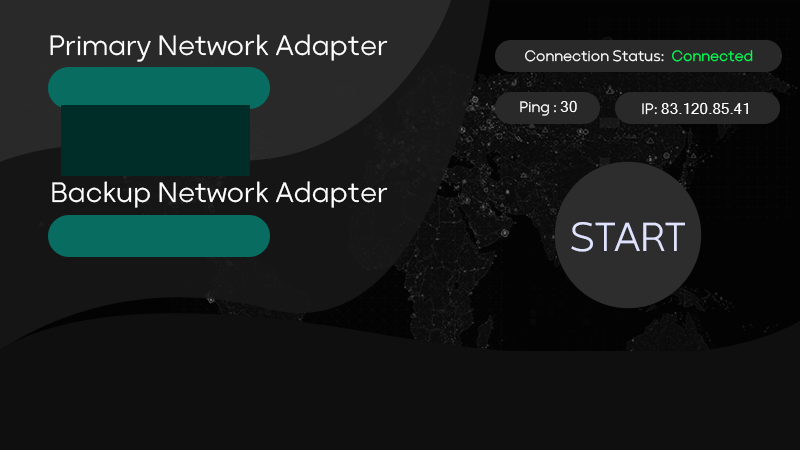
<style>
.page{position:relative;width:800px;height:450px;background:#0f0f0f}
.page>*{position:absolute;margin:0}
.t1{font:28.9px "KalamehFaNum-Light";color:#ffffff}
.t2{font:15.4px "KalamehFaNum-Light";color:#ffffff}
.t3{font:15.4px "KalamehFaNum-Light";color:#00ff54}
.t4{font:15.4px "MicrosoftSansSerif";color:#ffffff}
.t5{font:42px "KalamehFaNum-Light";color:#dfe3fe}
</style>
<div class="page">
<p class="t1" style="left:50px;top:34px;width:338px;height:28px">Primary Network Adapter</p>
<p class="t2" style="left:525px;top:50px;width:228px;height:12px">Connection Status:  <span class="t3">Connected</span></p>
<p class="t2" style="left:520px;top:100px;width:57px;height:16px">Ping : <span class="t4">30</span></p>
<p class="t4" style="left:642px;top:102px;width:106px;height:13px"><span class="t2">IP: </span>83.120.85.41</p>
<p class="t1" style="left:52px;top:181px;width:336px;height:27px">Backup Network Adapter</p>
<p class="t5" style="left:571px;top:222px;width:114px;height:30px">START</p>
</div>
